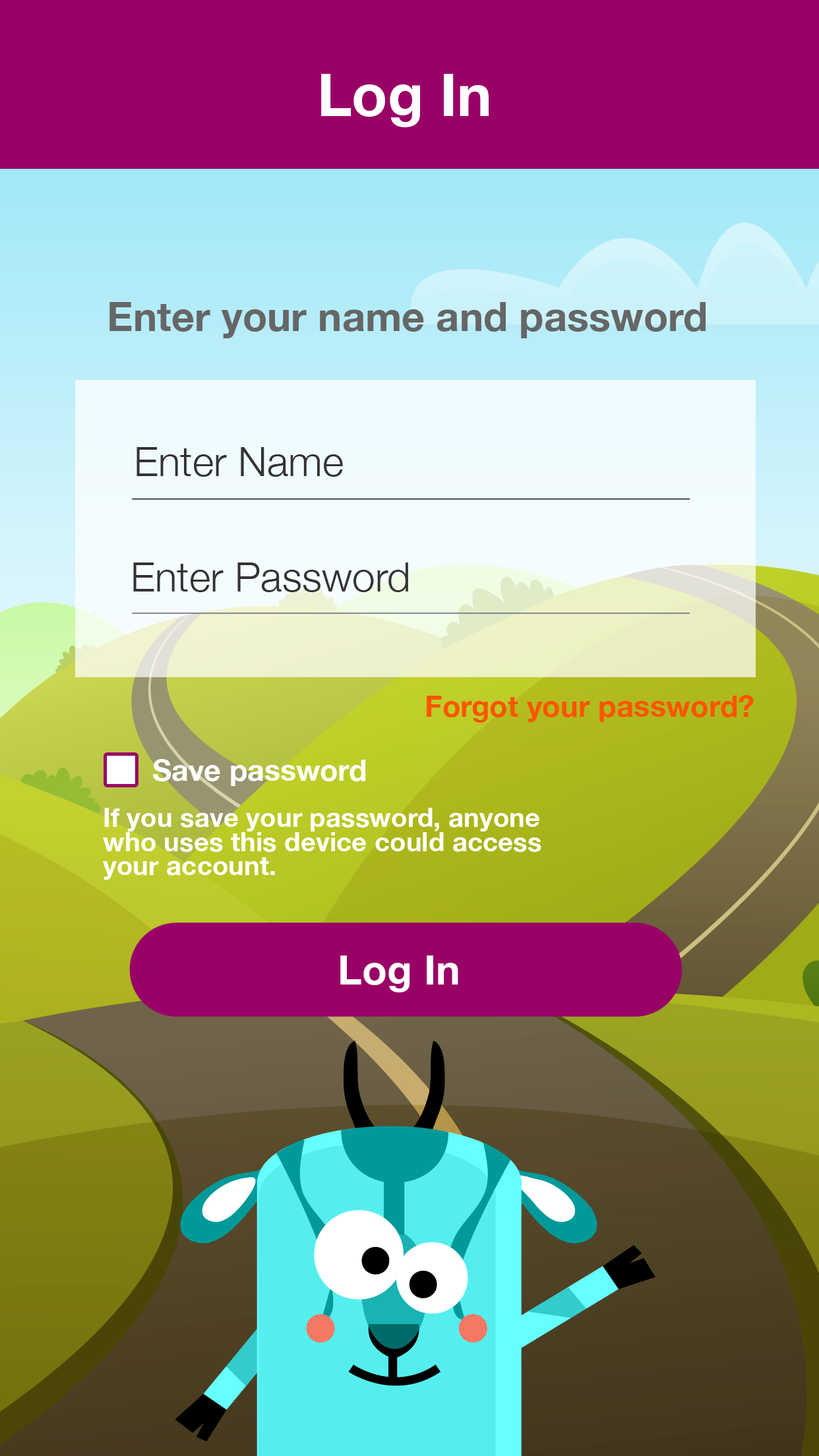
<style>
.page{position:relative;width:819px;height:1456px}
.page>*{position:absolute;margin:0}
.t1{font:58.8px "HelveticaNeue-Bold";color:#ffffff}
.t2{font:40.4px "HelveticaNeue-Bold";color:#666666}
.t3{font:41.1px "HelveticaNeue-Light";color:#292b2d}
.t4{font:30px "HelveticaNeue-Bold";color:#ff5400}
.t5{font:29.5px "HelveticaNeue-Bold";color:#ffffff}
.t6{font:26.6px/23.9px "HelveticaNeue-Bold";color:#ffffff}
.t7{font:41.1px "HelveticaNeue-Bold";color:#ffffff}
</style>
<div class="page">
<p class="t1" style="left:321px;top:74px;width:168px;height:53px">Log In</p>
<p class="t2" style="left:109px;top:302px;width:597px;height:36px">Enter your name and password</p>
<p class="t3" style="left:136px;top:447px;width:207px;height:30px">Enter Name</p>
<p class="t3" style="left:133px;top:562px;width:275px;height:30px">Enter Password</p>
<p class="t4" style="left:427px;top:695px;width:327px;height:28px">Forgot your password?</p>
<p class="t5" style="left:153px;top:759px;width:213px;height:27px">Save password</p>
<p class="t6" style="left:102px;top:808px;width:439px;height:72px">If you save your password, anyone<br>who uses this device could access your account.</p>
<p class="t7" style="left:340px;top:955px;width:118px;height:37px">Log In</p>
</div>
